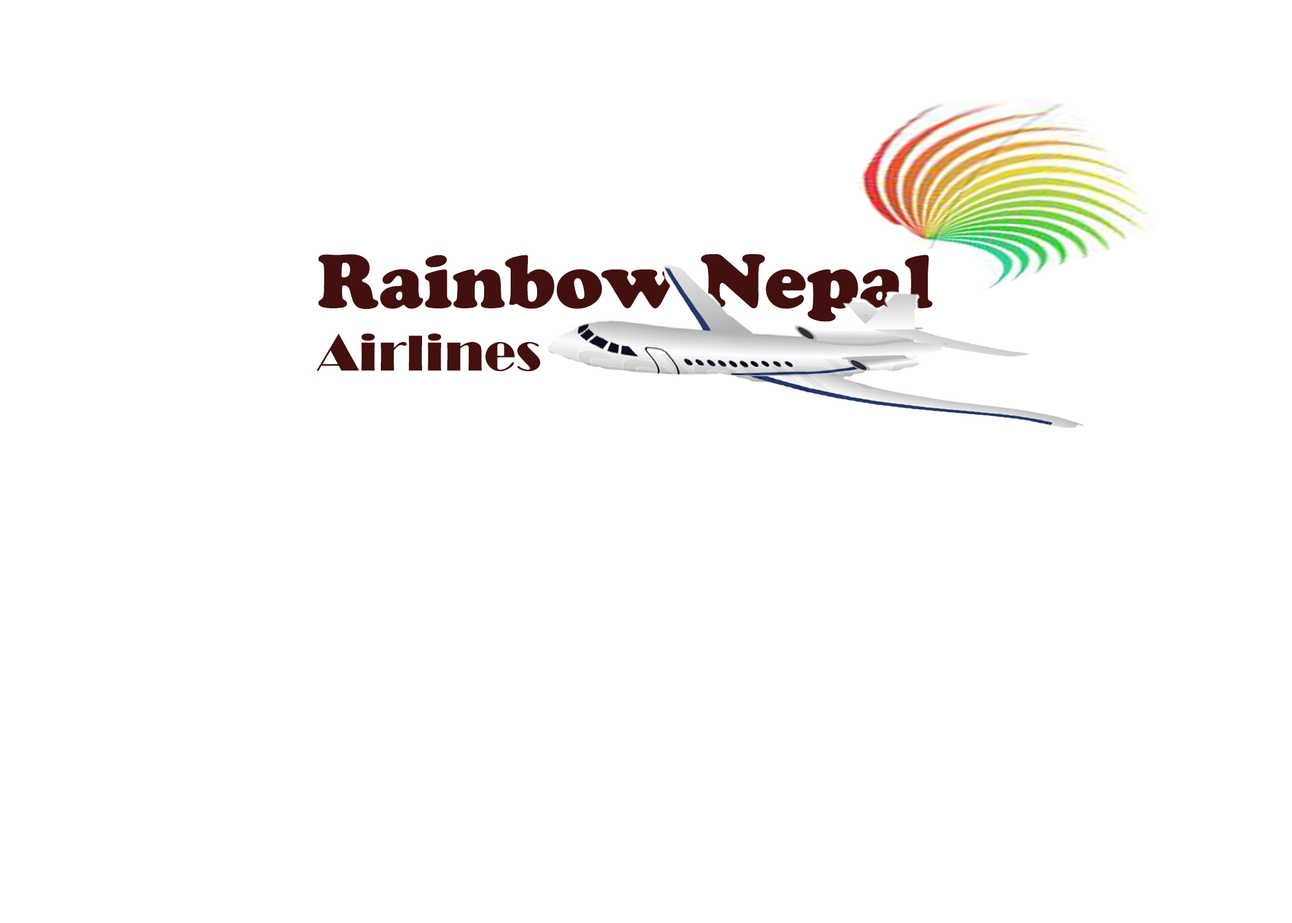
<style>
.page{position:relative;width:1292px;height:923px;background:#ffffff}
.page>*{position:absolute;margin:0}
.t1{font:78.8px "CooperBlack";color:#42100e}
.t2{font:52.5px "Broadway";color:#42100e}
</style>
<div class="page">
<p class="t1" style="left:317px;top:254px;width:616px;height:118px">Rainbow Nepal<br><span class="t2">Airlines</span></p>
</div>
